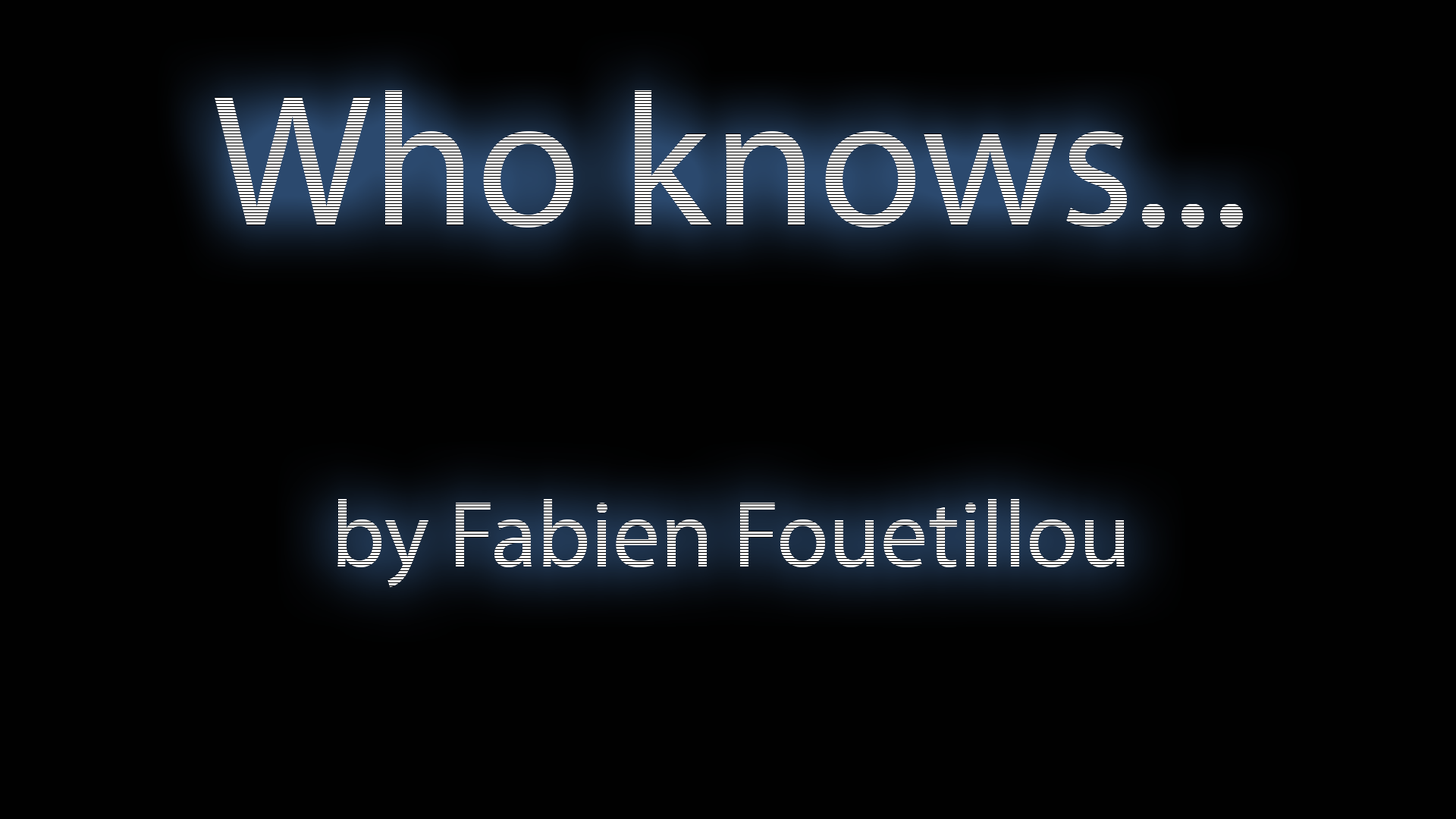
<style>
.page{position:relative;width:1456px;height:819px;background:#010101}
.page>*{position:absolute;margin:0}
.t1{font:94.8px "MyriadPro-Regular";color:#ffffff}
.t2{font:189.6px "MyriadPro-Regular";color:#ffffff}
</style>
<div class="page">
<p class="t1" style="left:215px;top:90px;width:1028px;height:498px;text-align:center"><span class="t2">Who knows...<br><br></span>by Fabien Fouetillou</p>
</div>
